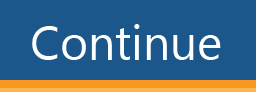
<style>
.page{position:relative;width:256px;height:92px;background:#1c578b}
.page>*{position:absolute;margin:0}
.t1{font:48px "SegoeUI";color:#ffffff}
</style>
<div class="page">
<p class="t1" style="left:32px;top:24px;width:189px;height:36px">Continue</p>
</div>
